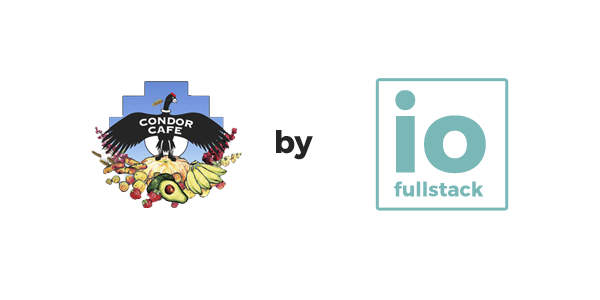
<style>
.page{position:relative;width:600px;height:300px;background:#ffffff}
.page>*{position:absolute;margin:0}
.t1{font:20px/24px "Montserrat-Bold";color:#7ab8b8}
.t2{font:104px/24px "Montserrat-Bold";color:#7ab8b8}
.t3{font:31px "Montserrat-Bold";color:#252525}
</style>
<div class="page">
<p class="t1" style="left:394px;top:90px;width:92px;height:107px;text-align:center"><span class="t2">io<br></span>fullstack</p>
<p class="t3" style="left:276px;top:130px;width:37px;height:30px">by</p>
</div>
